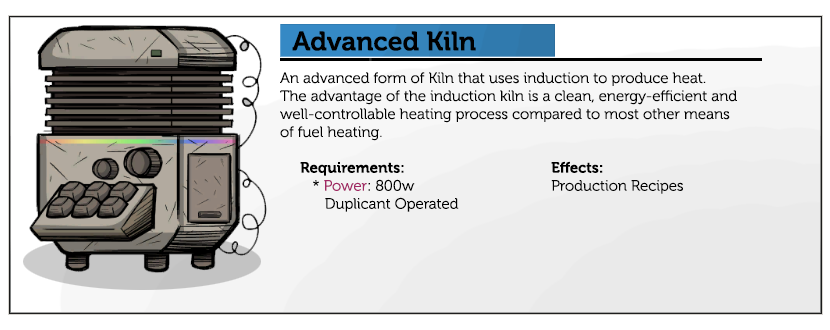
<style>
.page{position:relative;width:830px;height:330px;background:#ffffff}
.page>*{position:absolute;margin:0}
.t1{font:26.7px "Museo-700";color:#000000}
.t2{font:15px "Museo-300";color:#000000}
.t3{font:15px "Museo-700";color:#000000}
.t4{font:15px "Museo-300";color:#a12864}
</style>
<div class="page">
<p class="t1" style="left:292px;top:31px;width:184px;height:20px">Advanced Kiln</p>
<p class="t2" style="left:280px;top:72px;width:457px;height:69px">An advanced form of Kiln that uses induction to produce heat. <br>The advantage of the induction kiln is a clean, energy-efficient and well-controllable heating process compared to most other means of fuel heating.</p>
<p class="t2" style="left:551px;top:161px;width:132px;height:33px"><span class="t3">Effects:</span><br>Production Recipes</p>
<p class="t2" style="left:300px;top:162px;width:159px;height:50px"><span class="t3">Requirements:<br></span>   * <span class="t4">Power</span>: 800w<br>      Duplicant Operated</p>
</div>
